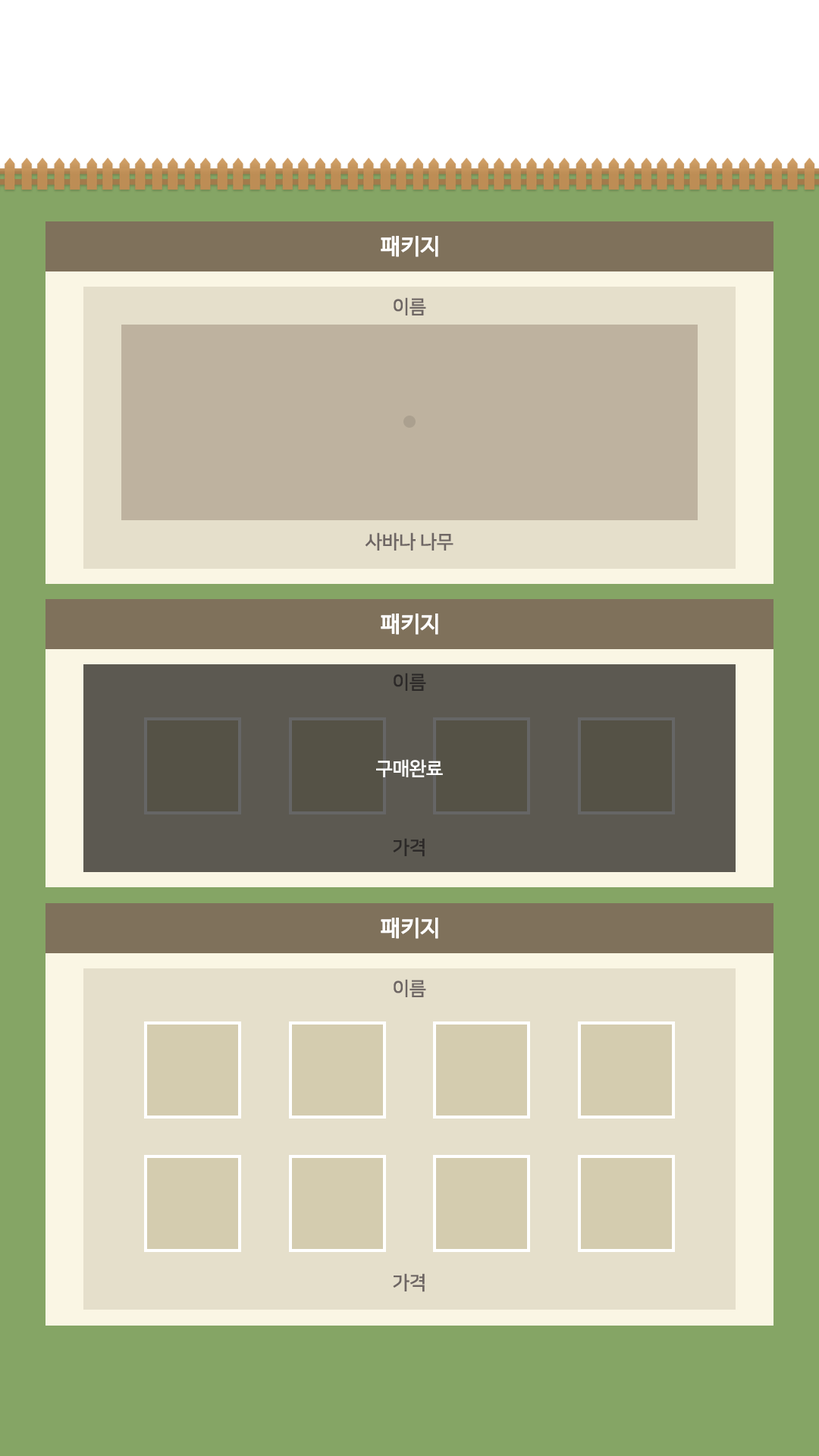
<style>
.page{position:relative;width:819px;height:1456px;background:#85a565}
.page>*{position:absolute;margin:0}
.t1{font:22.1px "NanumBarunGothic";letter-spacing:-0.025em;color:#ffffff;font-weight:bold}
.t2{font:19px "NanumSquareOTFB";letter-spacing:-0.025em;color:#6e6664}
.t3{font:19px "NanumSquareOTFB";letter-spacing:-0.025em;color:#2c2928}
.t4{font:19px "NanumSquareOTFB";letter-spacing:-0.025em;color:#ffffff}
</style>
<div class="page">
<p class="t1" style="left:381px;top:236px;width:57px;height:21px">패키지</p>
<p class="t2" style="left:394px;top:297px;width:32px;height:18px">이름</p>
<p class="t2" style="left:365px;top:532px;width:88px;height:19px">사바나 나무</p>
<p class="t1" style="left:381px;top:613px;width:57px;height:22px">패키지</p>
<p class="t3" style="left:394px;top:673px;width:32px;height:18px">이름</p>
<p class="t4" style="left:376px;top:759px;width:67px;height:18px">구매완료</p>
<p class="t3" style="left:393px;top:838px;width:32px;height:19px">가격</p>
<p class="t1" style="left:381px;top:918px;width:57px;height:21px">패키지</p>
<p class="t2" style="left:394px;top:979px;width:32px;height:18px">이름</p>
<p class="t2" style="left:393px;top:1273px;width:32px;height:19px">가격</p>
</div>
